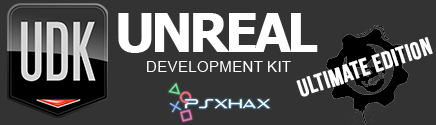
<style>
.page{position:relative;width:436px;height:125px;background:#333333}
.page>*{position:absolute;margin:0}
.t1{font:54.4px "Tahoma-Bold";letter-spacing:-0.075em;color:#ffffff}
.t2{font:24.2px "BebasNeue";color:#ffffff;font-weight:bold}
.t3{font:15.5px "ArialMT";color:#ffffff}
</style>
<div class="page">
<p class="t1" style="left:118px;top:13px;width:200px;height:40px">UNREAL</p>
<p class="t2" style="left:296px;top:37px;width:137px;height:60px;rotate:-18deg">ultimate edition</p>
<p class="t3" style="left:147px;top:61px;width:144px;height:11px">DEVELOPMENT KIT</p>
</div>
